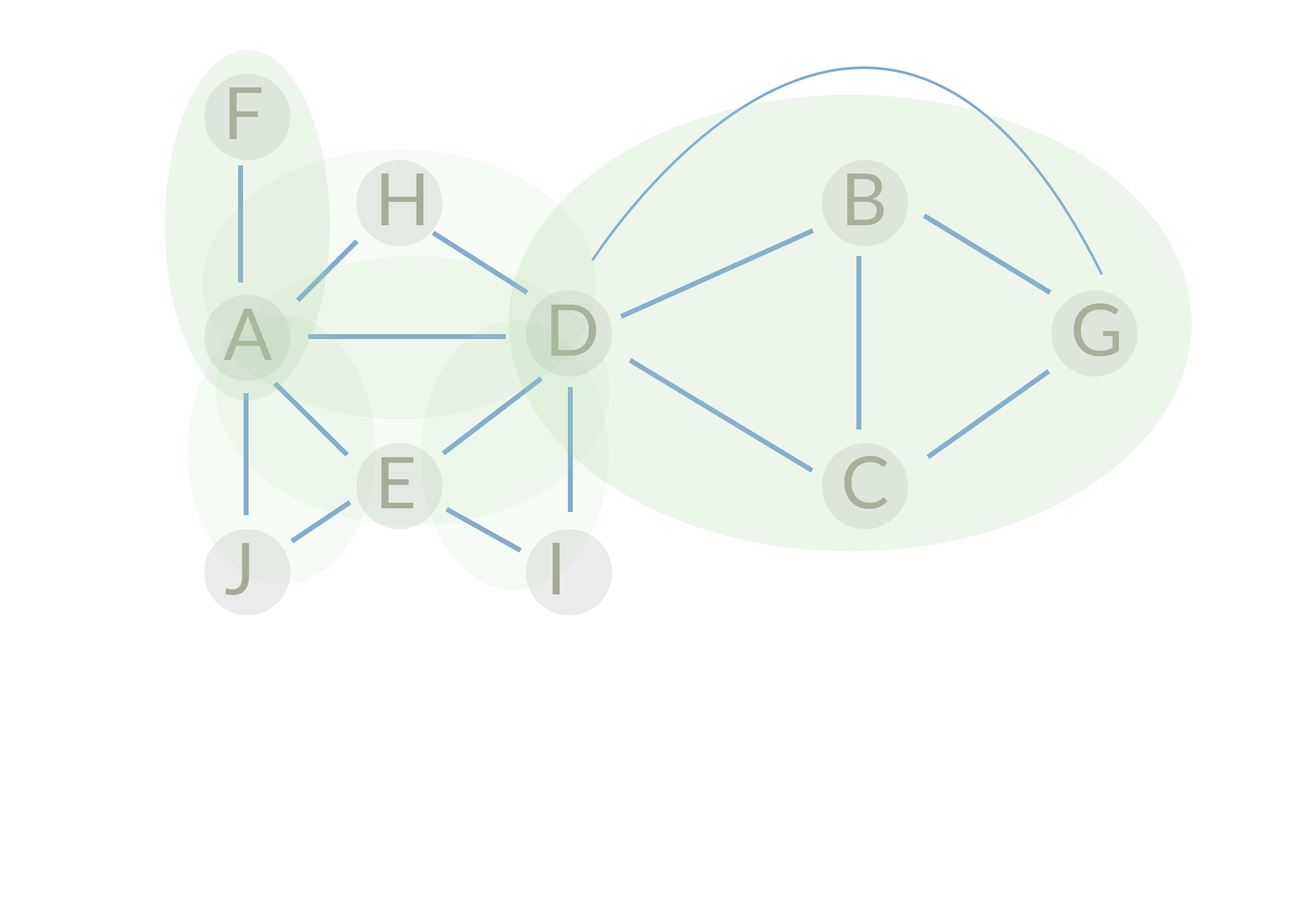
<style>
.page{position:relative;width:1292px;height:923px;background:#ffffff}
.page>*{position:absolute;margin:0}
.t1{font:71.8px "Lato-Regular";color:#a8a898}
</style>
<div class="page">
<p class="t1" style="left:229px;top:87px;width:32px;height:52px">F</p>
<p class="t1" style="left:381px;top:174px;width:43px;height:51px">H</p>
<p class="t1" style="left:847px;top:174px;width:37px;height:51px">B</p>
<p class="t1" style="left:551px;top:305px;width:45px;height:51px">D</p>
<p class="t1" style="left:1074px;top:303px;width:45px;height:53px">G</p>
<p class="t1" style="left:223px;top:308px;width:50px;height:52px">A</p>
<p class="t1" style="left:381px;top:457px;width:32px;height:51px">E</p>
<p class="t1" style="left:844px;top:456px;width:44px;height:53px">C</p>
<p class="t1" style="left:225px;top:543px;width:24px;height:52px">J</p>
<p class="t1" style="left:553px;top:543px;width:7px;height:51px">I</p>
</div>
